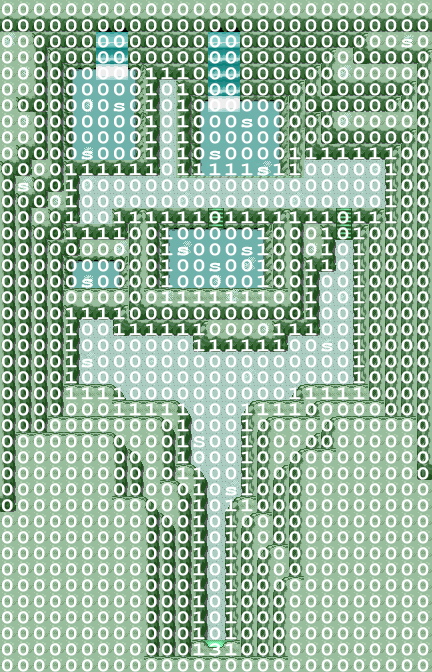
<style>
.page{position:relative;width:432px;height:672px;background:#98be9d}
.page>*{position:absolute;margin:0}
.t1{font:19.2px/16px "CourierNewPS-BoldMT";letter-spacing:0.066em;color:#ffffff;scale:1.25 1}
</style>
<div class="page">
<p class="t1" style="left:2px;top:3px;width:427px;height:669px">000000000000000000000000000<br>000000000000000000000000000<br>0000000000000000000000000s0<br>000000000000000000000000000<br>000000000111000000000000000<br>000000000101000000000000000<br>0000000s0101000000000000000<br>000000000101000s00000000000<br>000000000101000000000000000<br>00000s0001010s0000111111100<br>0000111111011111s1100000100<br>0s0010000000000000000000100<br>000010000000000000000000100<br>000010011111101111111011100<br>000011110010000010001010000<br>00000000001s000s10001010000<br>0000000000100s0010011010000<br>00000s000010000010010010000<br>000000000011111110010010000<br>000011110000000000010010000<br>000010011111100001110010000<br>00001000000011111100s010000<br>00001s000000000000000010000<br>000010000000000000000010000<br>000011110000000000111110000<br>000000011111000111100000000<br>000000000001000100000000000<br>000000000001S00100000000000<br>000000000001000100000000000<br>000000000001100100000000000<br>00000000000010s100000000000<br>000000000000101100000000000<br>000000000000101000000000000<br>000000000000101000000000000<br>000000000000101000000000000<br>000000000000101000000000000<br>000000000000101000000000000<br>000000000000101000000000000<br>000000000000101000000000000<br>000000000000101000000000000<br>000000000000131000000000000<br>000000000000000000000000000</p>
</div>
